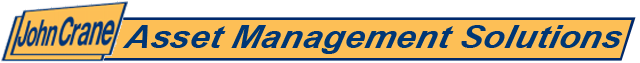
<style>
.page{position:relative;width:640px;height:63px;background:#fdbf56}
.page>*{position:absolute;margin:0}
.t1{font:32.6px "ArialNarrow-BoldItalic";color:#003775;scale:1.33 1}
</style>
<div class="page">
<p class="t1" style="left:122px;top:25px;width:501px;height:29px">Asset Management Solutions</p>
</div>
